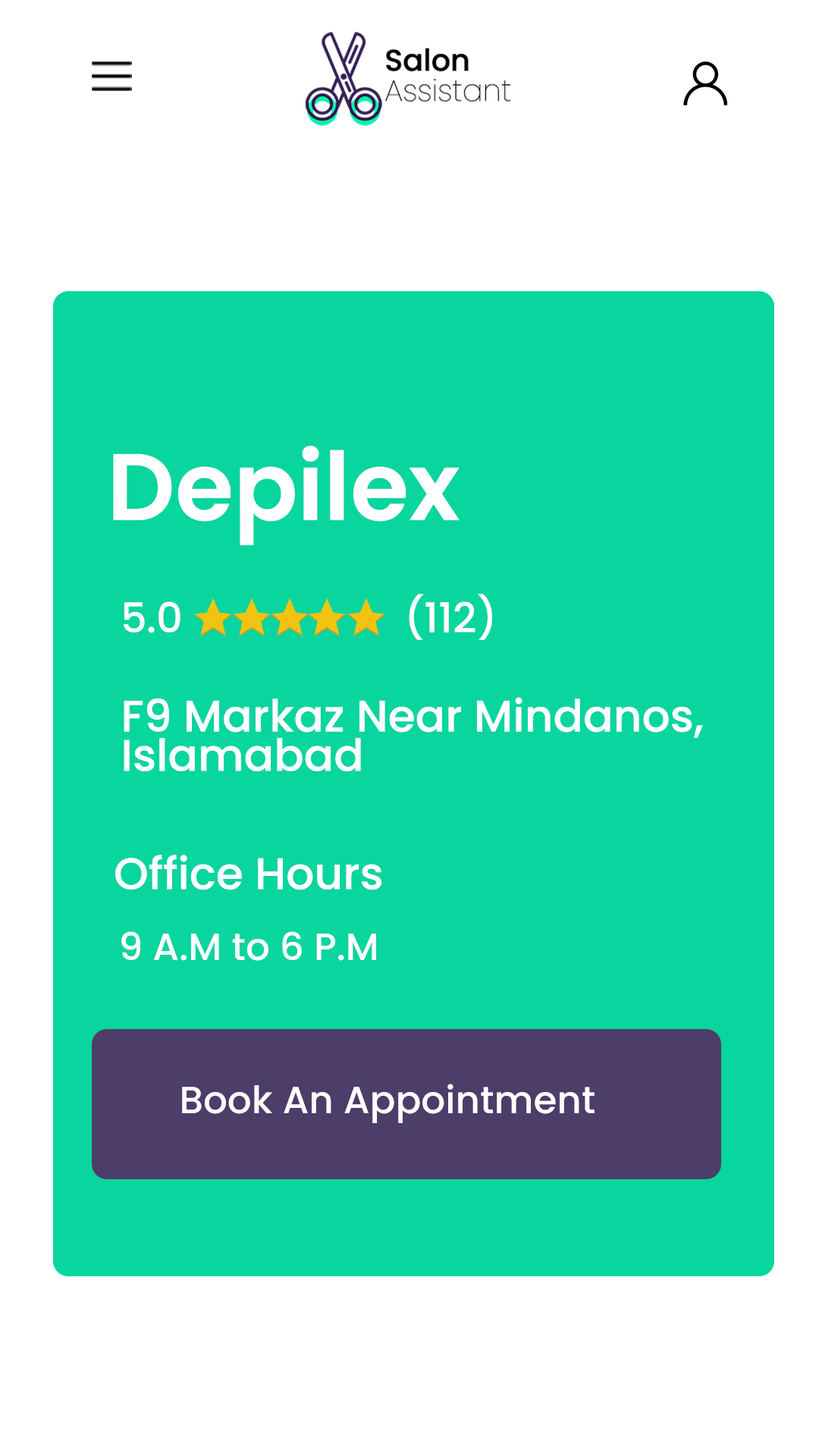
<style>
.page{position:relative;width:819px;height:1456px;background:#09d59f}
.page>*{position:absolute;margin:0}
.t1{font:94.8px "Poppins-SemiBold";color:#ffffff}
.t2{font:41.2px "Poppins-Medium";color:#ffffff}
.t3{font:44.2px "Poppins-Medium";color:#ffffff}
.t4{font:37.9px "Poppins-Medium";color:#ffffff}
</style>
<div class="page">
<p class="t1" style="left:113px;top:446px;width:347px;height:99px">Depilex</p>
<p class="t2" style="left:409px;top:594px;width:83px;height:46px">(112)</p>
<p class="t2" style="left:124px;top:601px;width:56px;height:32px">5.0</p>
<p class="t3" style="left:124px;top:697px;width:579px;height:74px">F9 Markaz Near Mindanos, Islamabad</p>
<p class="t3" style="left:115px;top:855px;width:266px;height:35px">Office Hours</p>
<p class="t4" style="left:121px;top:931px;width:255px;height:30px">9 A.M to 6 P.M</p>
<p class="t4" style="left:182px;top:1084px;width:413px;height:39px">Book An Appointment</p>
</div>
